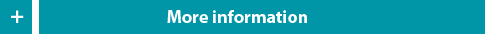
<style>
.page{position:relative;width:485px;height:34px;background:#0096a7}
.page>*{position:absolute;margin:0}
.t1{font:24px "MyriadPro-Bold";color:#ffffff}
.t2{font:18px "MyriadPro-Bold";color:#ffffff}
</style>
<div class="page">
<p class="t1" style="left:11px;top:10px;width:13px;height:13px">+</p>
<p class="t2" style="left:167px;top:10px;width:140px;height:13px">More information</p>
</div>
